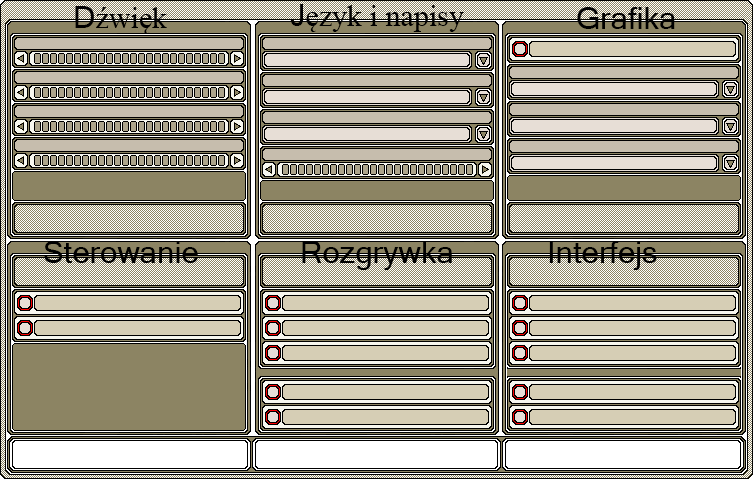
<style>
.page{position:relative;width:753px;height:480px;background:#8c8463}
.page>*{position:absolute;margin:0}
.t1{font:30px "TimesNewRomanPSMT";color:#000000}
.t2{font:30px "Mangal";color:#000000}
</style>
<div class="page">
<p class="t1" style="left:75px;top:6px;width:92px;height:28px"><span class="t2">D</span>źwięk</p>
<p class="t1" style="left:290px;top:4px;width:174px;height:28px"><span class="t2">J</span>ęzyk i napisy</p>
<p class="t2" style="left:577px;top:7px;width:98px;height:22px">Grafika</p>
<p class="t2" style="left:44px;top:241px;width:154px;height:22px">Sterowanie</p>
<p class="t2" style="left:302px;top:241px;width:150px;height:29px">Rozgrywka</p>
<p class="t2" style="left:549px;top:241px;width:108px;height:29px">Interfejs</p>
</div>
